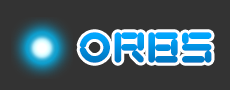
<style>
.page{position:relative;width:230px;height:90px;background:#333333}
.page>*{position:absolute;margin:0}
.t1{font:43.4px "LOXO"}
</style>
<div class="page">
<p class="t1" style="left:79px;top:32px;width:133px;height:31px">ORBS</p>
</div>
